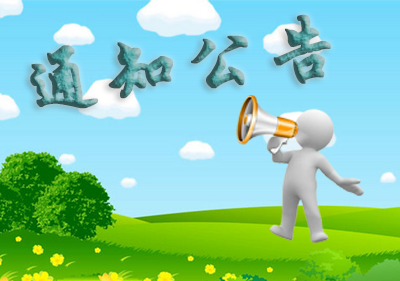
<style>
.page{position:relative;width:400px;height:281px}
.page>*{position:absolute;margin:0}
.t1{font:76.9px "STXingkai";letter-spacing:0.04em;font-weight:bold}
</style>
<div class="page">
<p class="t1" style="left:30px;top:14px;width:301px;height:95px;rotate:-7deg">通知公告</p>
</div>
